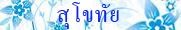
<style>
.page{position:relative;width:181px;height:30px}
.page>*{position:absolute;margin:0}
.t1{font:30px "AngsanaUPC";letter-spacing:0.025em;color:#0824f9}
</style>
<div class="page">
<p class="t1" style="left:57px;top:2px;width:62px;height:27px">สุโขทัย</p>
</div>
